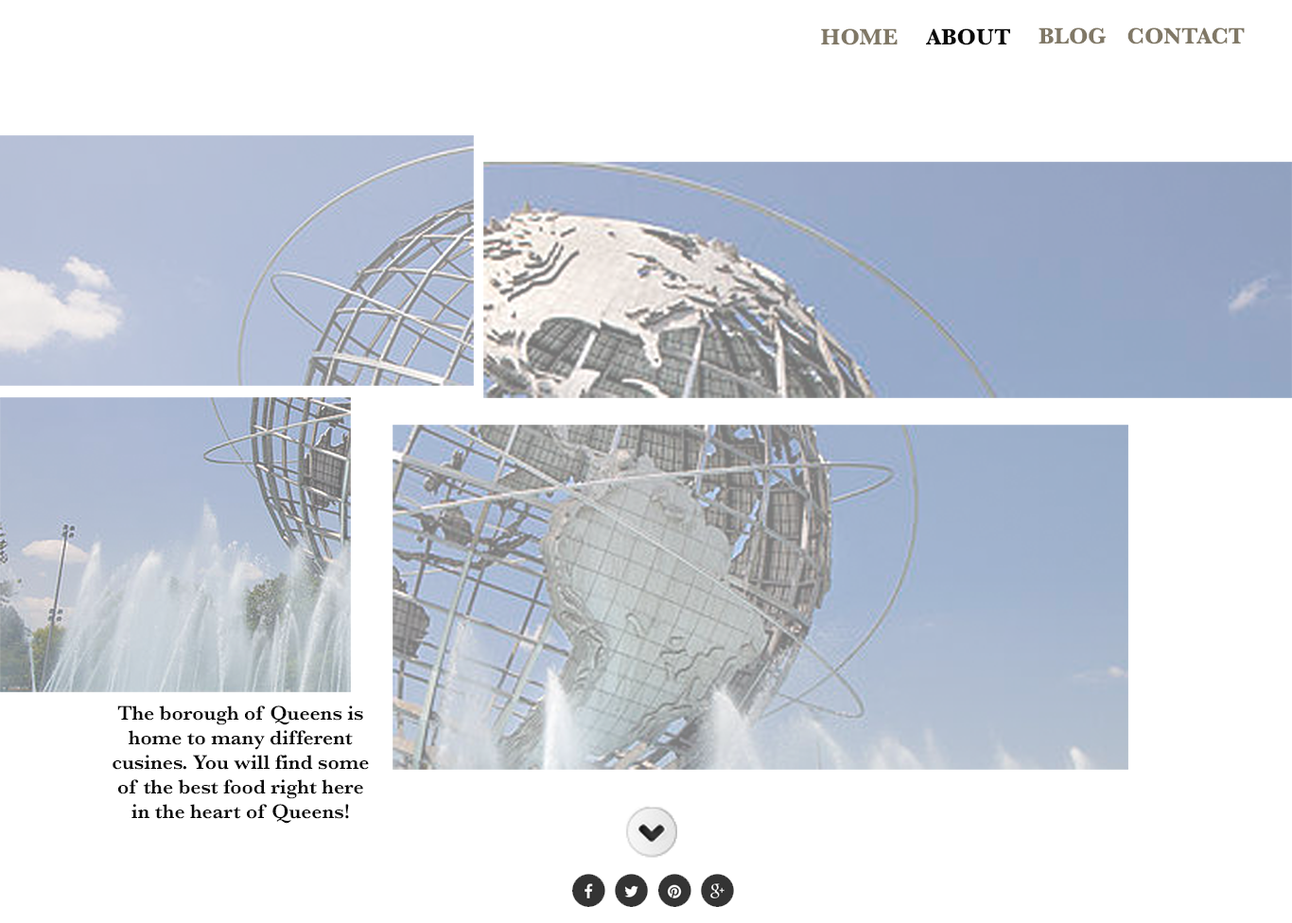
<style>
.page{position:relative;width:1292px;height:923px;background:#ffffff}
.page>*{position:absolute;margin:0}
.t1{font:23.1px "Baskerville-Bold";color:#807866}
.t2{font:23.1px "Baskerville-Bold";color:#090909}
.t3{font:20.5px "Baskerville-SemiBold";color:#090909}
</style>
<div class="page">
<p class="t1" style="left:821px;top:28px;width:76px;height:17px">HOME</p>
<p class="t2" style="left:926px;top:28px;width:84px;height:17px">ABOUT</p>
<p class="t1" style="left:1038px;top:27px;width:68px;height:17px">BLOG</p>
<p class="t1" style="left:1127px;top:27px;width:118px;height:17px">CONTACT</p>
<p class="t3" style="left:113px;top:706px;width:256px;height:118px;text-align:center">The borough of Queens is home to many different cusines. You will find some of the best food right here in the heart of Queens!</p>
</div>
